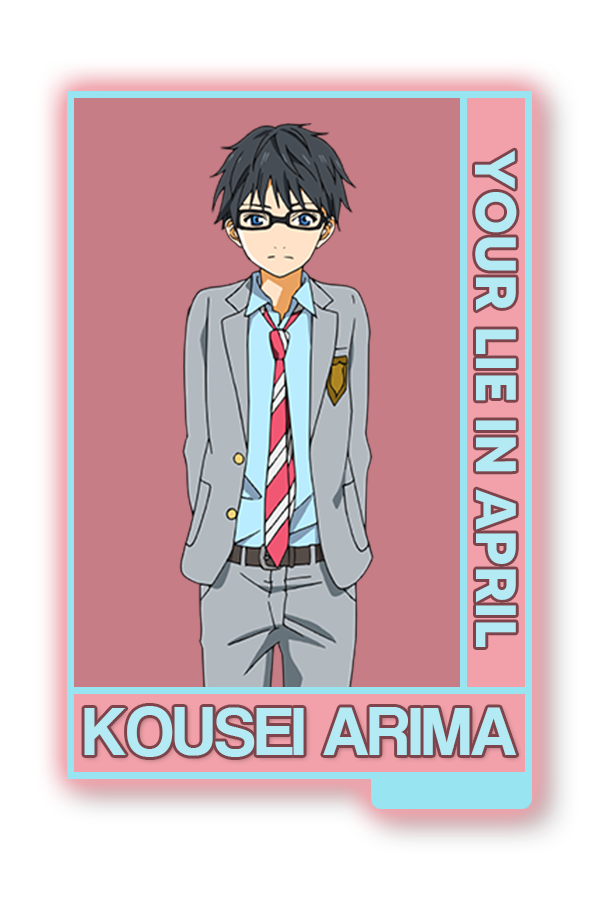
<style>
.page{position:relative;width:600px;height:900px;background:#c77d85}
.page>*{position:absolute;margin:0}
.t1{font:56.7px "MADETOMMY-Bold";color:#b3eaf4}
.t2{font:70.8px "CoolveticaRg-Regular";color:#b3eaf4}
</style>
<div class="page">
<p class="t1" style="left:475px;top:150px;width:42px;height:497px;rotate:90deg">YOUR LIE IN APRIL</p>
<p class="t2" style="left:84px;top:706px;width:433px;height:51px">KOUSEI ARIMA</p>
</div>
